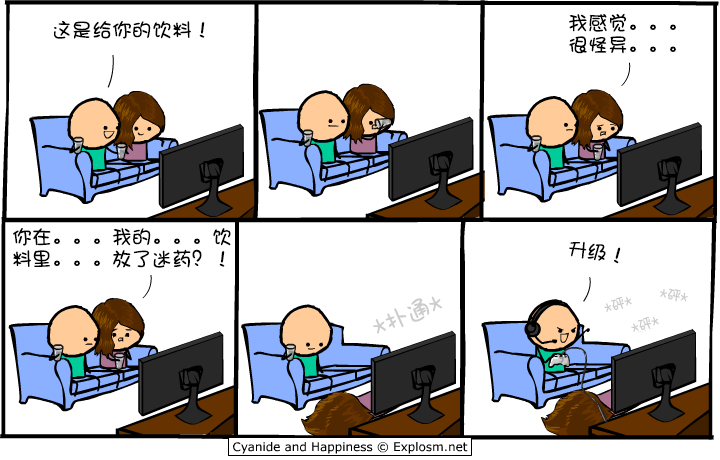
<style>
.page{position:relative;width:720px;height:460px;background:#ffffff}
.page>*{position:absolute;margin:0}
.t1{font:20px/22px "DFShaoNvW5";color:#000000}
.t2{font:20px "DFShaoNvW5";color:#000000}
.t3{font:14px "DFShaoNvW5";color:#cccccc}
.t4{font:24px "DFShaoNvW5";color:#cccccc}
</style>
<div class="page">
<p class="t1" style="left:569px;top:13px;width:107px;height:41px">我感觉。。。<br>很怪异。。。</p>
<p class="t2" style="left:53px;top:20px;width:152px;height:19px">这是给你的饮料！</p>
<p class="t1" style="left:13px;top:228px;width:218px;height:40px">你在。。。我的。。。饮<br>料里。。。放了迷药？！</p>
<p class="t2" style="left:569px;top:241px;width:52px;height:23px;rotate:8deg">升级！</p>
<p class="t3" style="left:660px;top:288px;width:28px;height:14px;rotate:10deg">*砰*</p>
<p class="t4" style="left:373px;top:296px;width:69px;height:38px;rotate:-22deg">*扑通*</p>
<p class="t3" style="left:604px;top:296px;width:28px;height:16px;rotate:-18deg">*砰*</p>
<p class="t3" style="left:631px;top:316px;width:28px;height:16px;rotate:-18deg">*砰*</p>
</div>
